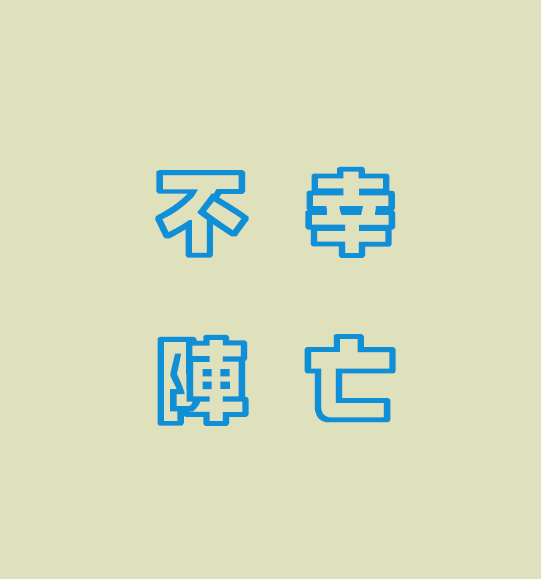
<style>
.page{position:relative;width:541px;height:579px;background:#dfe1bc}
.page>*{position:absolute;margin:0}
.t1{font:96px "¾­µä¿ÕµþºÚ Regular";color:#0f8fd6;font-weight:bold}
</style>
<div class="page">
<p class="t1" style="left:155px;top:166px;width:241px;height:260px">不 幸<br>阵 亡</p>
</div>
